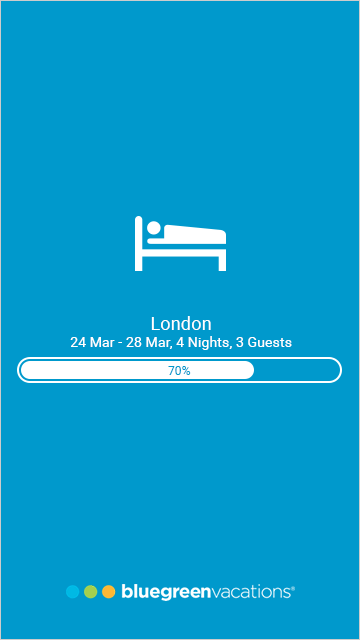
<style>
.page{position:relative;width:360px;height:640px;background:#0099cc}
.page>*{position:absolute;margin:0}
.t1{font:14px "Roboto-Regular";letter-spacing:0.01em;color:#ffffff}
.t2{font:18px "Roboto-Regular";letter-spacing:0.01em;color:#ffffff}
.t3{font:12px "Roboto-Regular";letter-spacing:0.01em;color:#0099cc}
</style>
<div class="page">
<p class="t1" style="left:70px;top:316px;width:222px;height:34px;text-align:center"><span class="t2">London<br></span>24 Mar - 28 Mar, 4 Nights, 3 Guests</p>
<p class="t3" style="left:168px;top:366px;width:23px;height:9px">70%</p>
</div>
